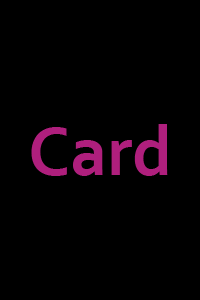
<style>
.page{position:relative;width:200px;height:300px;background:#000000}
.page>*{position:absolute;margin:0}
.t1{font:71.7px "Corbel-Bold";color:#af1f7d}
</style>
<div class="page">
<p class="t1" style="left:31px;top:124px;width:137px;height:52px">Card</p>
</div>
